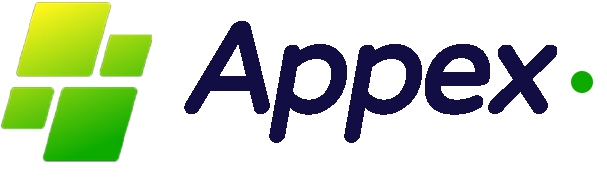
<style>
.page{position:relative;width:607px;height:178px;background:#ffffff}
.page>*{position:absolute;margin:0}
.t1{font:125px "VarelaRound-Regular";letter-spacing:-0.06em;color:#120d42;font-weight:bold;font-style:italic}
</style>
<div class="page">
<p class="t1" style="left:184px;top:21px;width:373px;height:122px">Appex</p>
</div>
